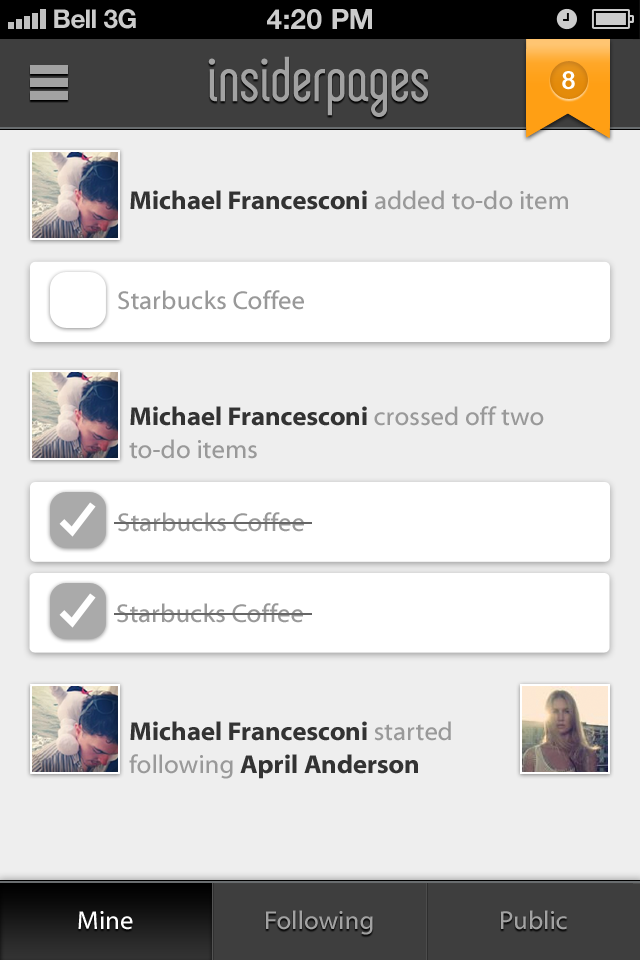
<style>
.page{position:relative;width:640px;height:960px;background:#eeeeee}
.page>*{position:absolute;margin:0}
.t1{font:26px "HelveticaNeue-Bold";color:#cccccc}
.t2{font:26px "HelveticaNeue-Bold";color:#cccccc;text-transform:uppercase}
.t3{font:28px "HelveticaNeue-Bold";color:#cccccc;text-transform:uppercase}
.t4{font:25px "ArialRoundedMT-Bold";color:#ffffff}
.t5{font:26px "MyriadWebPro-Bold";color:#333333}
.t6{font:26px "MyriadWebPro";color:#999999}
.t7{font:26px/33px "MyriadWebPro";color:#999999}
.t8{font:26px/33px "MyriadWebPro-Bold";color:#333333}
.t9{font:26px "MyriadWebPro";color:#ffffff}
.t10{font:26px "MyriadWebPro";color:#a2a2a2}
</style>
<div class="page">
<p class="t1" style="left:54px;top:9px;width:42px;height:20px">Bell</p>
<p class="t2" style="left:104px;top:9px;width:32px;height:20px">3G</p>
<p class="t3" style="left:267px;top:9px;width:105px;height:21px">4:20 pM</p>
<p class="t4" style="left:562px;top:71px;width:13px;height:19px">8</p>
<p class="t5" style="left:130px;top:190px;width:438px;height:20px">Michael Francesconi<span class="t6"> added to-do item</span></p>
<p class="t6" style="left:118px;top:290px;width:186px;height:20px">Starbucks Coffee</p>
<p class="t7" style="left:129px;top:406px;width:415px;height:53px"><span class="t8">Michael Francesconi </span>crossed off two <br>to-do items</p>
<p class="t6" style="left:118px;top:512px;width:186px;height:20px">Starbucks Coffee</p>
<p class="t6" style="left:117px;top:603px;width:186px;height:20px">Starbucks Coffee</p>
<p class="t8" style="left:129px;top:721px;width:322px;height:58px">Michael Francesconi <span class="t7">started <br>following </span>April Anderson</p>
<p class="t9" style="left:78px;top:911px;width:55px;height:19px">Mine</p>
<p class="t10" style="left:266px;top:910px;width:107px;height:25px">Following</p>
<p class="t10" style="left:501px;top:910px;width:66px;height:20px">Public</p>
</div>
